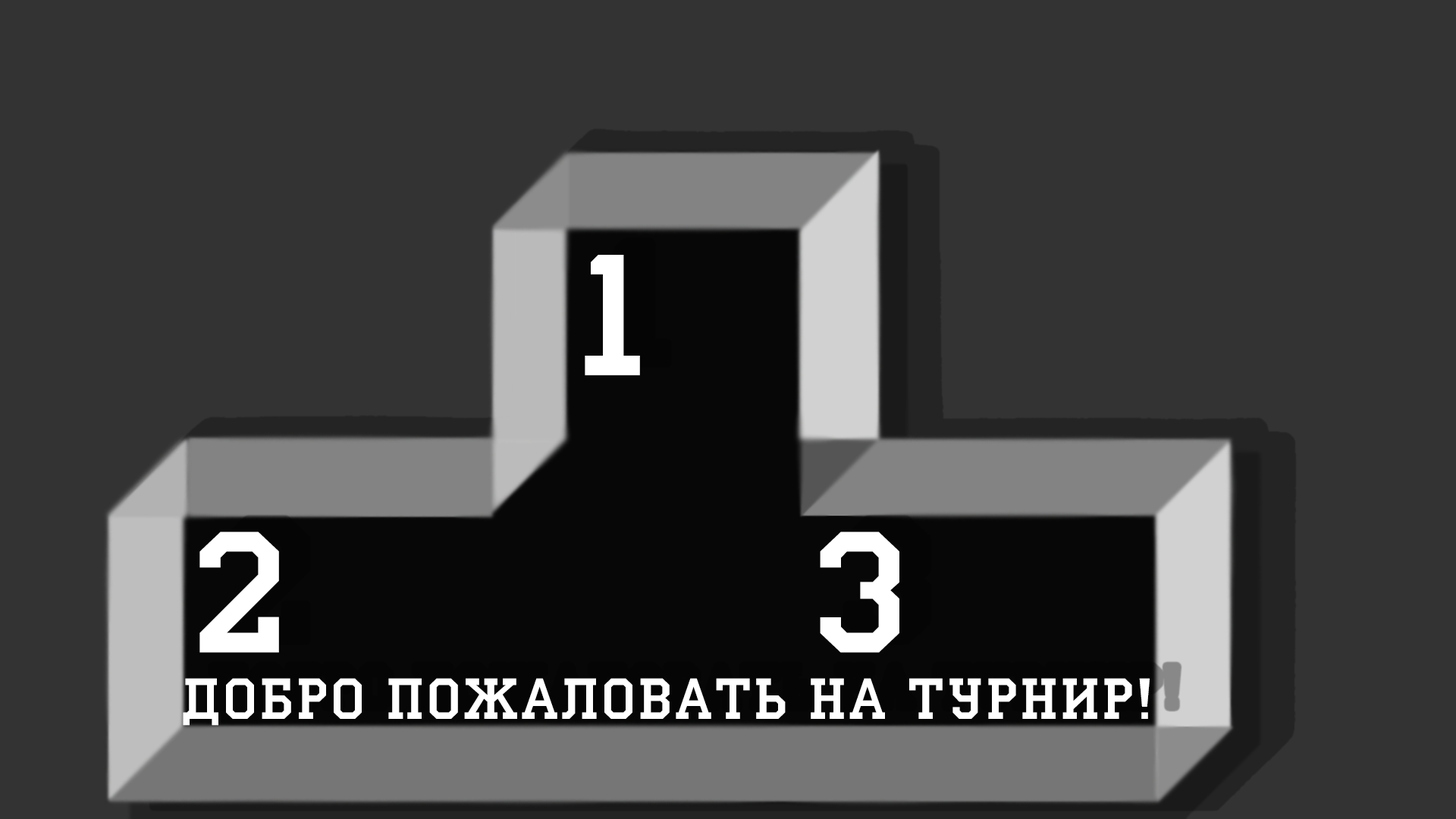
<style>
.page{position:relative;width:1456px;height:819px;background:#333333}
.page>*{position:absolute;margin:0}
.t1{font:166.8px "ACampus";letter-spacing:0.09em;color:#ffffff;text-transform:uppercase}
.t2{font:56.1px "ACampus";letter-spacing:0.09em;color:#ffffff;text-transform:uppercase}
</style>
<div class="page">
<p class="t1" style="left:585px;top:255px;width:55px;height:120px">1</p>
<p class="t1" style="left:199px;top:532px;width:80px;height:121px">2</p>
<p class="t1" style="left:820px;top:532px;width:79px;height:121px">3</p>
<p class="t2" style="left:183px;top:678px;width:967px;height:48px">добро пожаловать на турнир!</p>
</div>
